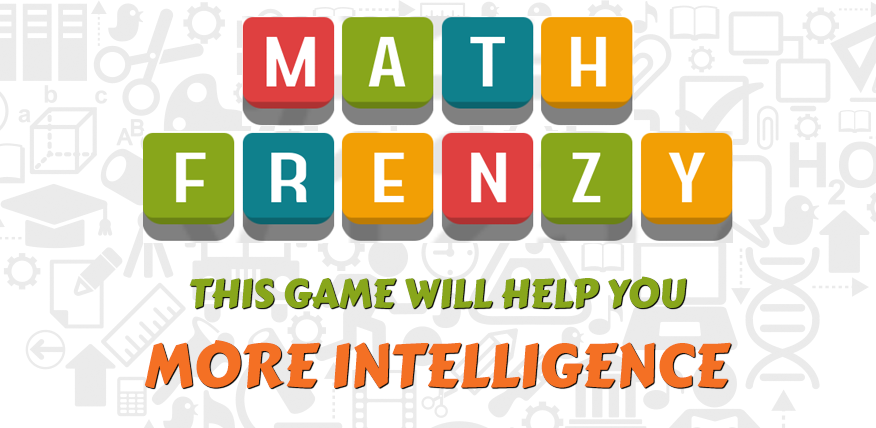
<style>
.page{position:relative;width:876px;height:428px;background:#ffffff}
.page>*{position:absolute;margin:0}
.t1{font:40px "CarterOne";color:#88a61b}
.t2{font:60px "CarterOne";color:#f47024}
</style>
<div class="page">
<p class="t1" style="left:189px;top:276px;width:497px;height:33px">THIS GAME WILL HELP YOU</p>
<p class="t2" style="left:144px;top:340px;width:587px;height:48px">MORE INTELLIGENCE</p>
</div>
